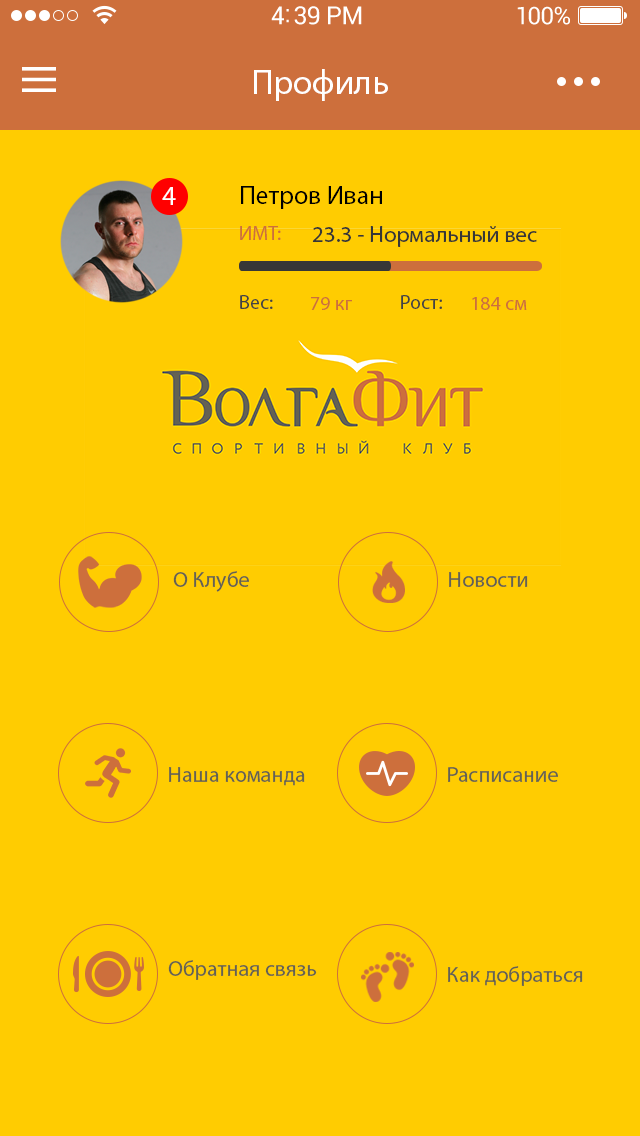
<style>
.page{position:relative;width:640px;height:1136px;background:#ffcc01}
.page>*{position:absolute;margin:0}
.t1{font:35px "MyriadPro-Regular";color:#ffffff}
.t2{font:27px "MyriadPro-Regular";color:#ffffff}
.t3{font:26px "MyriadPro-Regular";color:#000000}
.t4{font:20px "MyriadPro-Regular";color:#cd6f3c}
.t5{font:23px "MyriadPro-Regular";color:#373737}
.t6{font:20px "MyriadPro-Regular";color:#434343}
.t7{font:20.1px "MyriadPro-Regular";color:#cd6f3c}
.t8{font:22px "MyriadPro-Regular";color:#646253}
</style>
<div class="page">
<p class="t1" style="left:254px;top:69px;width:134px;height:32px">Профиль</p>
<p class="t2" style="left:162px;top:187px;width:14px;height:18px">4</p>
<p class="t3" style="left:241px;top:186px;width:141px;height:23px">Петров Иван</p>
<p class="t4" style="left:240px;top:226px;width:41px;height:14px">ИМТ:</p>
<p class="t5" style="left:312px;top:226px;width:225px;height:21px">23.3 - Нормальный вес</p>
<p class="t6" style="left:240px;top:295px;width:33px;height:14px">Вес:</p>
<p class="t7" style="left:311px;top:297px;width:41px;height:13px">79 кг</p>
<p class="t6" style="left:401px;top:295px;width:41px;height:14px">Рост:</p>
<p class="t7" style="left:472px;top:297px;width:55px;height:13px">184 см</p>
<p class="t8" style="left:173px;top:571px;width:76px;height:21px">О Клубе</p>
<p class="t8" style="left:449px;top:572px;width:79px;height:15px">Новости</p>
<p class="t8" style="left:169px;top:767px;width:136px;height:19px">Наша команда</p>
<p class="t8" style="left:448px;top:767px;width:110px;height:15px">Расписание</p>
<p class="t8" style="left:168px;top:960px;width:149px;height:20px">Обратная связь</p>
<p class="t8" style="left:448px;top:966px;width:135px;height:20px">Как добраться</p>
</div>
